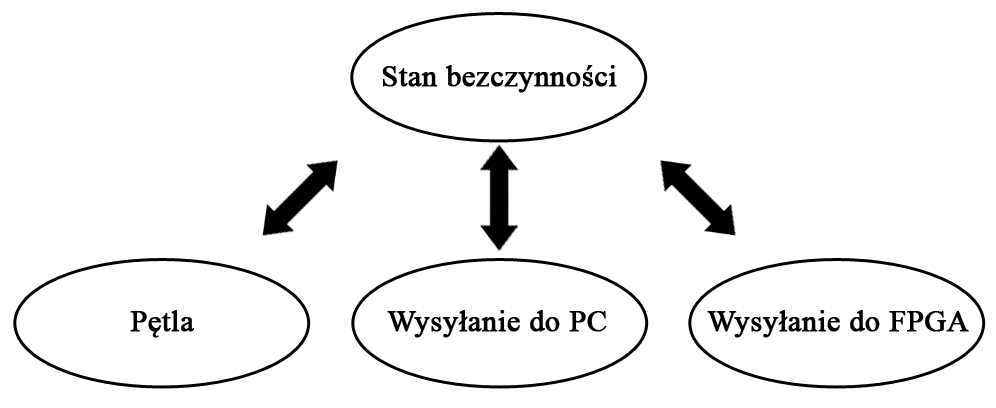
<style>
.page{position:relative;width:996px;height:408px;background:#ffffff}
.page>*{position:absolute;margin:0}
.t1{font:30px "TimesNewRomanPSMT";color:#000000;font-weight:bold}
</style>
<div class="page">
<p class="t1" style="left:382px;top:65px;width:235px;height:28px">Stan bezczynności</p>
<p class="t1" style="left:130px;top:310px;width:65px;height:28px">Pętla</p>
<p class="t1" style="left:387px;top:310px;width:220px;height:28px">Wysyłanie do PC</p>
<p class="t1" style="left:707px;top:310px;width:262px;height:28px">Wysyłanie do FPGA</p>
</div>
